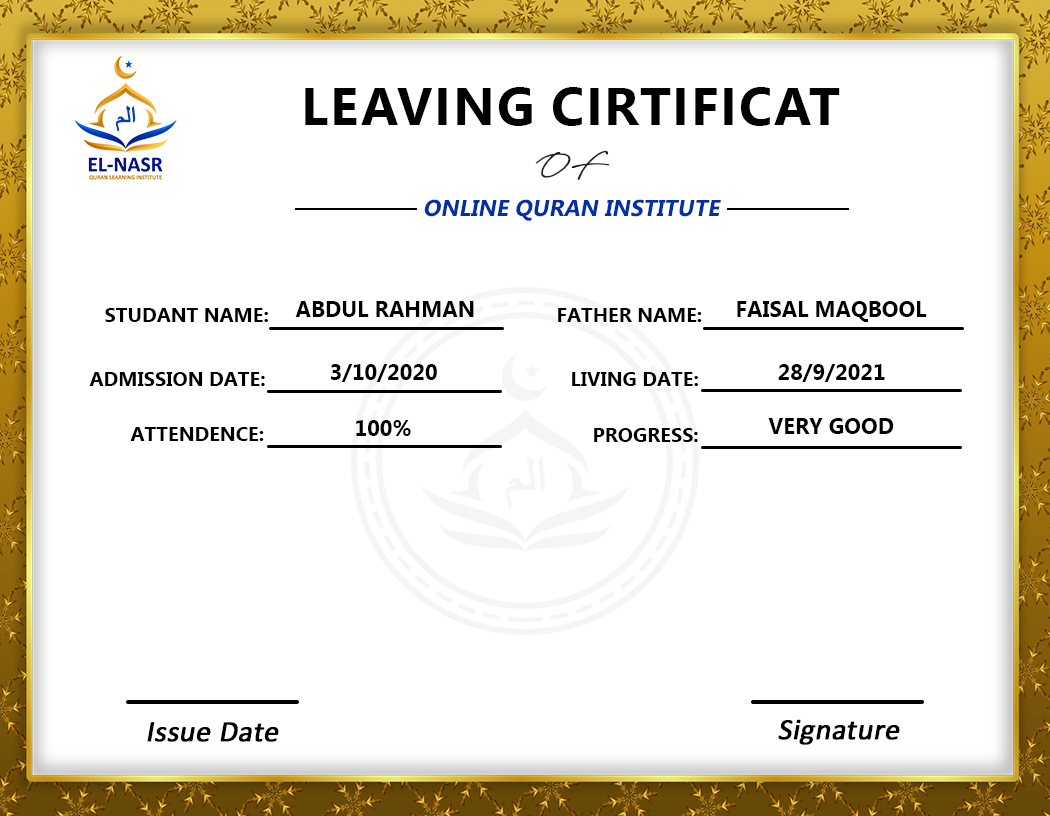
<style>
.page{position:relative;width:1050px;height:816px;background:#ffffff}
.page>*{position:absolute;margin:0}
.t1{font:52.9px "SegoeUI-Bold";color:#000000;text-transform:uppercase}
.t2{font:28px "AntroVectra-Bolder";color:#242424;text-transform:uppercase;font-weight:bold}
.t3{font:23px "MyanmarText-Bold";color:#002fa7;text-transform:uppercase;font-style:italic}
.t4{font:22px "MyanmarText-Bold";color:#000000;text-transform:uppercase}
.t5{font:20px "MyanmarText-Bold";color:#000000;text-transform:uppercase}
.t6{font:29.7px "Calibri";color:#000000;font-weight:bold;font-style:italic}
</style>
<div class="page">
<p class="t1" style="left:305px;top:87px;width:535px;height:39px">Leaving Cirtificat</p>
<p class="t2" style="left:535px;top:150px;width:75px;height:30px">of</p>
<p class="t3" style="left:424px;top:199px;width:297px;height:22px">Online Quran Institute</p>
<p class="t4" style="left:295px;top:301px;width:179px;height:16px">Abdul Rahman</p>
<p class="t4" style="left:737px;top:301px;width:190px;height:21px">faisal maqbool</p>
<p class="t5" style="left:105px;top:308px;width:163px;height:14px">Studant Name:</p>
<p class="t5" style="left:558px;top:308px;width:144px;height:14px">Father Name:</p>
<p class="t4" style="left:331px;top:364px;width:106px;height:18px">3/10/2020</p>
<p class="t4" style="left:778px;top:364px;width:107px;height:18px">28/9/2021</p>
<p class="t5" style="left:89px;top:372px;width:176px;height:14px">Admission Date:</p>
<p class="t5" style="left:572px;top:372px;width:126px;height:14px">Living Date:</p>
<p class="t4" style="left:356px;top:420px;width:55px;height:16px">100%</p>
<p class="t4" style="left:768px;top:418px;width:126px;height:16px">very good</p>
<p class="t5" style="left:130px;top:427px;width:134px;height:14px">Attendence:</p>
<p class="t5" style="left:594px;top:428px;width:104px;height:14px">Progress:</p>
<p class="t6" style="left:147px;top:722px;width:132px;height:20px">Issue Date</p>
<p class="t6" style="left:778px;top:719px;width:122px;height:26px">Signature</p>
</div>
